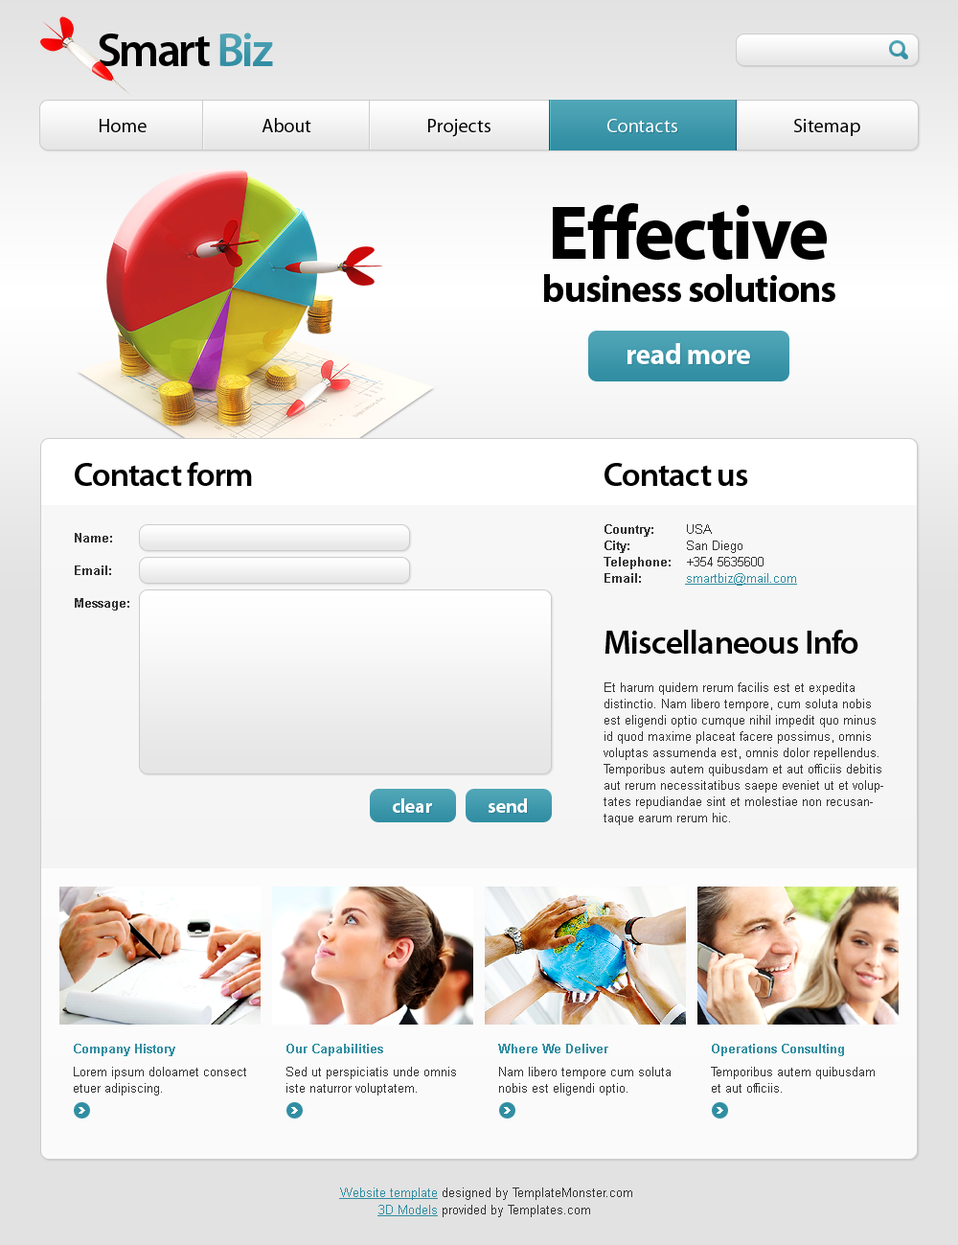
<style>
.page{position:relative;width:958px;height:1245px}
.page>*{position:absolute;margin:0}
.t1{font:47.9px "MyriadPro-Semibold";letter-spacing:-0.05em;color:#000000}
.t2{font:47.9px "MyriadPro-Semibold";letter-spacing:-0.05em;color:#308da2}
.t3{font:19.2px "MyriadPro-Regular";color:#000000}
.t4{font:76.6px "MyriadPro-Bold";letter-spacing:-0.025em;color:#000000}
.t5{font:38.3px "MyriadPro-Bold";letter-spacing:-0.025em;color:#000000}
.t6{font:28.7px "MyriadPro-Bold";letter-spacing:-0.025em;color:#ffffff}
.t7{font:33.5px "MyriadPro-Semibold";letter-spacing:-0.025em;color:#000000}
.t8{font:12.5px/32.6px "Arial-BoldMT";color:#323232}
.t9{font:12.5px/16.3px "Arial-BoldMT";color:#323232}
.t10{font:12.5px/16.3px "ArialMT";color:#323232}
.t11{font:12.5px/16.3px "ArialMT";color:#308da2;text-decoration:underline}
.t12{font:19.2px "MyriadPro-Bold";letter-spacing:-0.025em;color:#ffffff}
.t13{font:12.5px/16.3px "Arial-BoldMT";color:#318ea2}
.t14{font:12.5px/23px "ArialMT";color:#323232}
.t15{font:12.5px/17.2px "ArialMT";color:#323232}
.t16{font:12.5px/17.2px "ArialMT";color:#308da2}
.t17{font:12.5px/17.2px "ArialMT";color:#308da2;text-decoration:underline}
</style>
<div class="page">
<p class="t1" style="left:99px;top:33px;width:174px;height:33px">Smart <span class="t2">Biz</span></p>
<p class="t3" style="left:100px;top:118px;width:760px;height:19px">Home                              About                              Projects                              Contacts                              Sitemap</p>
<p class="t3" style="left:100px;top:118px;width:760px;height:19px">Home                              About                              Projects                              Contacts                              Sitemap</p>
<p class="t4" style="left:553px;top:203px;width:274px;height:57px">Effective</p>
<p class="t5" style="left:544px;top:274px;width:291px;height:28px">business solutions</p>
<p class="t6" style="left:628px;top:343px;width:122px;height:21px">read more</p>
<p class="t7" style="left:75px;top:462px;width:177px;height:24px">Contact form</p>
<p class="t7" style="left:605px;top:463px;width:143px;height:23px">Contact us</p>
<p class="t8" style="left:75px;top:533px;width:54px;height:77px">Name:<br>Email:<br>Message:</p>
<p class="t9" style="left:604px;top:524px;width:67px;height:59px">Country:<br>City:<br>Telephone:<br>Email:</p>
<p class="t10" style="left:685px;top:524px;width:112px;height:61px">USA<br>San Diego<br>+354 5635600<br><span class="t11">smartbiz@mail.com</span></p>
<p class="t7" style="left:605px;top:629px;width:253px;height:24px">Miscellaneous Info</p>
<p class="t10" style="left:604px;top:682px;width:279px;height:143px">Et harum quidem rerum facilis est et expedita distinctio. Nam libero tempore, cum soluta nobis est eligendi optio cumque nihil impedit quo minus id quod maxime placeat facere possimus, omnis voluptas assumenda est, omnis dolor repellendus. Temporibus autem quibusdam et aut officiis debitis aut rerum necessitatibus saepe eveniet ut et voluptates repudiandae sint et molestiae non recusantaque earum rerum hic.<br><br> tenetur a sapiente delectus, ut aut reiciendis voluptatibus maiores alias consequatur aut perferendis doloribus asperiores repellat.</p>
<p class="t12" style="left:393px;top:798px;width:39px;height:14px">clear</p>
<p class="t12" style="left:488px;top:798px;width:39px;height:14px">send</p>
<p class="t10" style="left:74px;top:1043px;width:172px;height:52px"><span class="t13">Company History<br></span><span class="t14">L</span>orem ipsum doloamet consect etuer adipiscing.</p>
<p class="t10" style="left:286px;top:1043px;width:170px;height:52px"><span class="t13">Our Capabilities<br></span><span class="t14">S</span>ed ut perspiciatis unde omnis iste naturror voluptatem.<br> accusantium doloremque laudantium, totam rem aperiam</p>
<p class="t10" style="left:498px;top:1043px;width:173px;height:52px"><span class="t13">Where We Deliver<br></span><span class="t14">N</span>am libero tempore cum soluta nobis est eligendi optio. cumque nihil impedit quo minus</p>
<p class="t10" style="left:711px;top:1043px;width:164px;height:49px"><span class="t13">Operations Consulting<br></span><span class="t14">T</span>emporibus autem quibusdam et aut officiis.<br> debitis aut rerum necessitatibus saepe evenie</p>
<p class="t15" style="left:339px;top:1187px;width:293px;height:30px;text-align:center"><span class="t16"> </span><span class="t17">Website template</span> designed by TemplateMonster.com<br><span class="t17">3D Models</span> provided by Templates.com</p>
</div>
